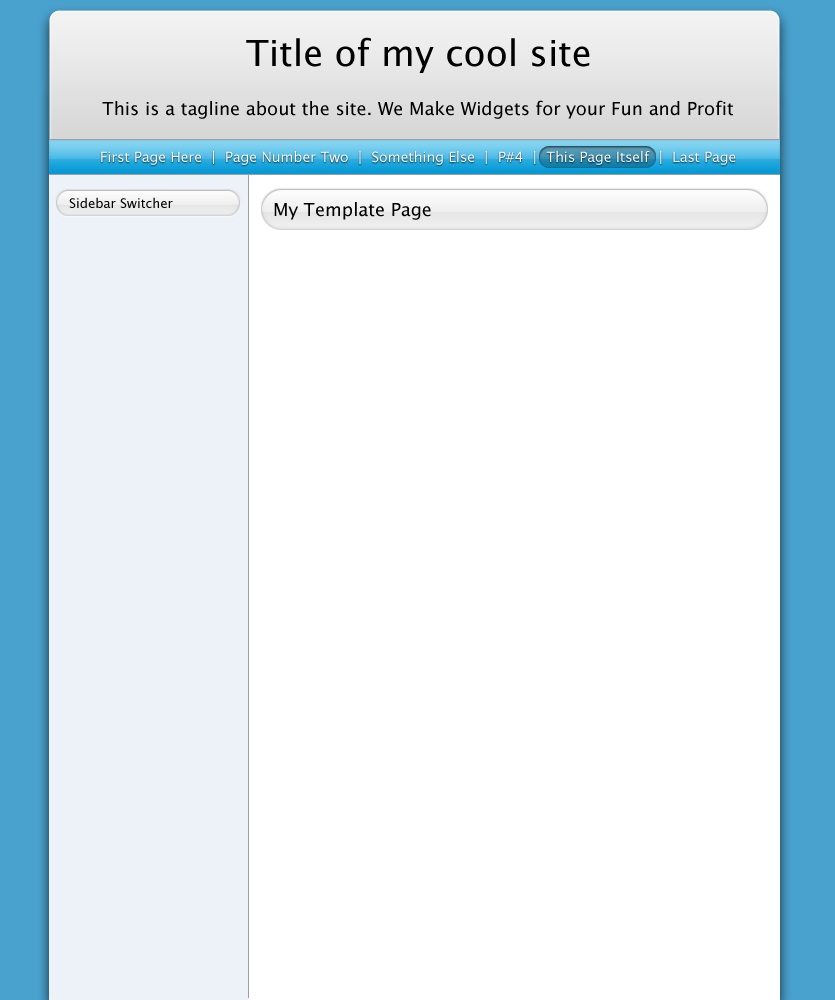
<style>
.page{position:relative;width:835px;height:1000px;background:#ffffff}
.page>*{position:absolute;margin:0}
.t1{font:36px "LucidaGrande";color:#000000}
.t2{font:18px "LucidaGrande";color:#000000}
.t3{font:14px "LucidaGrande";color:#ffffff}
.t4{font:13px "LucidaGrande";color:#000000}
</style>
<div class="page">
<p class="t1" style="left:246px;top:37px;width:344px;height:36px">Title of my cool site</p>
<p class="t2" style="left:102px;top:100px;width:631px;height:19px">This is a tagline about the site. We Make Widgets for your Fun and Profit</p>
<p class="t3" style="left:101px;top:151px;width:635px;height:14px">First Page Here  |  Page Number Two  |  Something Else  |  P#4  |  This Page Itself  |  Last Page</p>
<p class="t4" style="left:69px;top:197px;width:104px;height:11px">Sidebar Switcher</p>
<p class="t2" style="left:274px;top:202px;width:157px;height:18px">My Template Page</p>
</div>
